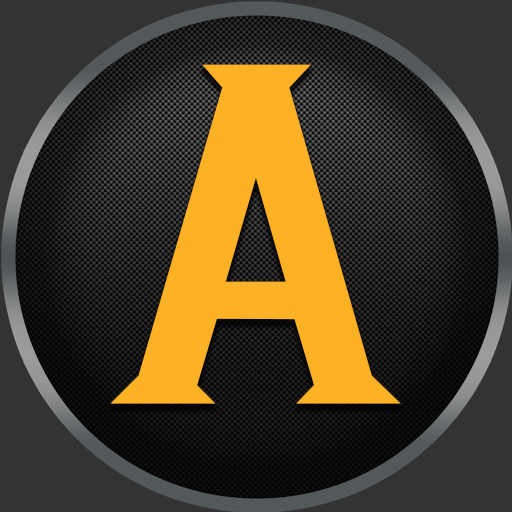
<style>
.page{position:relative;width:512px;height:512px;background:#333333}
.page>*{position:absolute;margin:0}
.t1{font:311.9px "SevenElevenSerifRegular";color:#fdb124}
</style>
<div class="page">
<p class="t1" style="left:110px;top:64px;width:291px;height:340px">A</p>
</div>
